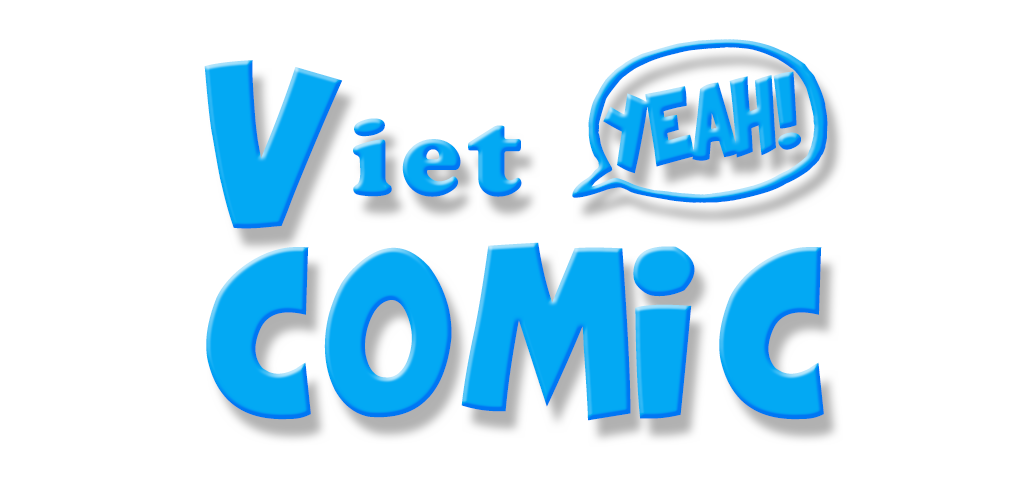
<style>
.page{position:relative;width:1024px;height:500px;background:#ffffff}
.page>*{position:absolute;margin:0}
.t1{font:114.6px/47.4px "ComixLoud";letter-spacing:0.07em;color:#03a9f4}
.t2{font:114.6px/47.4px "CooperBlack";letter-spacing:0.07em;color:#03a9f4}
.t3{font:124.6px/47.4px "ComixLoud";letter-spacing:0.07em;color:#03a9f4}
</style>
<div class="page">
<p class="t1" style="left:204px;top:39px;width:624px;height:382px">V<span class="t2">iet </span><span class="t3">*           </span>  <br>    <br><br><br>COMIC</p>
</div>
